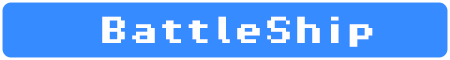
<style>
.page{position:relative;width:450px;height:60px;background:#358bff}
.page>*{position:absolute;margin:0}
.t1{font:30px "PixelOperatorHB8";color:#fefefe}
</style>
<div class="page">
<p class="t1" style="left:102px;top:16px;width:271px;height:31px">BattleShip</p>
</div>
